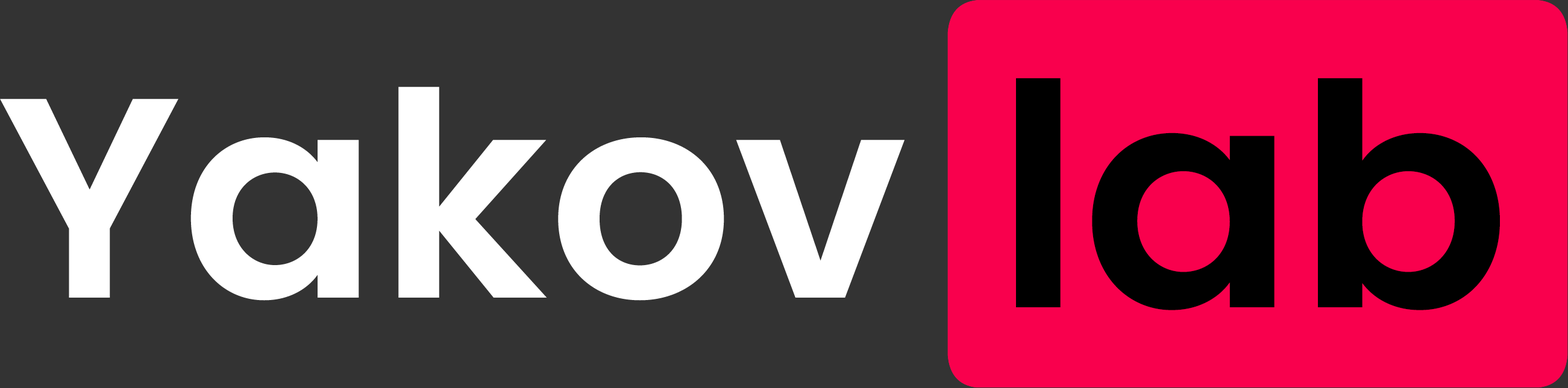
<style>
.page{position:relative;width:1568px;height:388px;background:#333333}
.page>*{position:absolute;margin:0}
.t1{font:309.5px "Poppins-SemiBold";color:#000000}
.t2{font:284.7px "Poppins-SemiBold";color:#ffffff}
</style>
<div class="page">
<p class="t1" style="left:1016px;top:78px;width:484px;height:232px">lab</p>
<p class="t2" style="left:0px;top:87px;width:905px;height:214px">Yakov</p>
</div>
